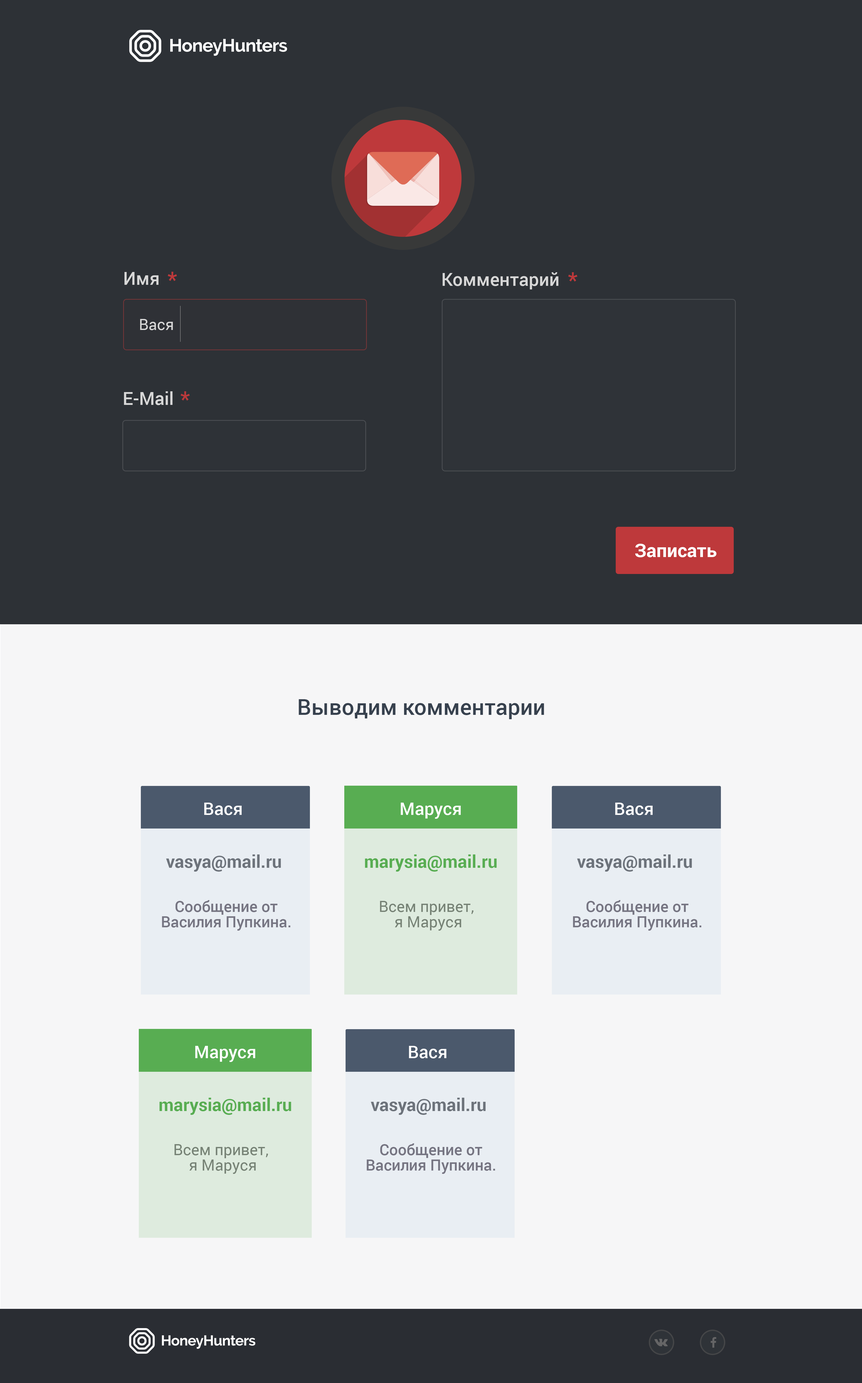
<style>
.page{position:relative;width:862px;height:1383px;background:#2d3136}
.page>*{position:absolute;margin:0}
.t1{font:18px "Roboto-Medium";color:#d7d7d7}
.t2{font:22.1px "Roboto-Medium";color:#be393b}
.t3{font:15.4px "Roboto-Regular";color:#d7d7d7}
.t4{font:18.5px "Roboto-Bold";color:#ffffff}
.t5{font:22.1px "Roboto-Medium";color:#37414e}
.t6{font:17.4px "Roboto-Medium";color:#ffffff}
.t7{font:17.4px "Roboto-Bold";color:#6d737b}
.t8{font:17.4px "Roboto-Bold";color:#58ad52}
.t9{font:15.4px/15.4px "Roboto-Medium";color:#767582}
.t10{font:15.4px/15.4px "Roboto-Regular";color:#768275}
</style>
<div class="page">
<p class="t1" style="left:124px;top:272px;width:35px;height:13px">Имя</p>
<p class="t2" style="left:168px;top:272px;width:9px;height:9px">*</p>
<p class="t1" style="left:443px;top:272px;width:116px;height:17px">Комментарий</p>
<p class="t2" style="left:568px;top:272px;width:10px;height:10px">*</p>
<p class="t3" style="left:140px;top:319px;width:33px;height:11px">Вася</p>
<p class="t1" style="left:124px;top:391px;width:49px;height:14px">E-Mail</p>
<p class="t2" style="left:181px;top:391px;width:9px;height:10px;opacity:0.96">*</p>
<p class="t4" style="left:635px;top:544px;width:82px;height:13px">Записать</p>
<p class="t5" style="left:299px;top:699px;width:245px;height:20px">Выводим комментарии</p>
<p class="t6" style="left:204px;top:803px;width:38px;height:12px">Вася</p>
<p class="t6" style="left:401px;top:803px;width:60px;height:16px">Маруся</p>
<p class="t6" style="left:615px;top:803px;width:38px;height:12px">Вася</p>
<p class="t7" style="left:166px;top:854px;width:115px;height:18px">vasya@mail.ru</p>
<p class="t8" style="left:365px;top:854px;width:132px;height:18px">marysia@mail.ru</p>
<p class="t7" style="left:577px;top:854px;width:115px;height:18px">vasya@mail.ru</p>
<p class="t9" style="left:162px;top:900px;width:128px;height:31px;text-align:center">Сообщение от Василия Пупкина.</p>
<p class="t10" style="left:380px;top:901px;width:94px;height:30px;text-align:center">Всем привет, <br>я Маруся</p>
<p class="t9" style="left:573px;top:900px;width:129px;height:31px;text-align:center">Сообщение от Василия Пупкина.</p>
<p class="t6" style="left:195px;top:1046px;width:60px;height:16px">Маруся</p>
<p class="t6" style="left:409px;top:1046px;width:37px;height:12px">Вася</p>
<p class="t8" style="left:159px;top:1098px;width:132px;height:17px">marysia@mail.ru</p>
<p class="t7" style="left:371px;top:1098px;width:115px;height:17px">vasya@mail.ru</p>
<p class="t10" style="left:174px;top:1144px;width:94px;height:30px;text-align:center">Всем привет, <br>я Маруся</p>
<p class="t9" style="left:367px;top:1143px;width:128px;height:31px;text-align:center">Сообщение от Василия Пупкина.</p>
</div>
